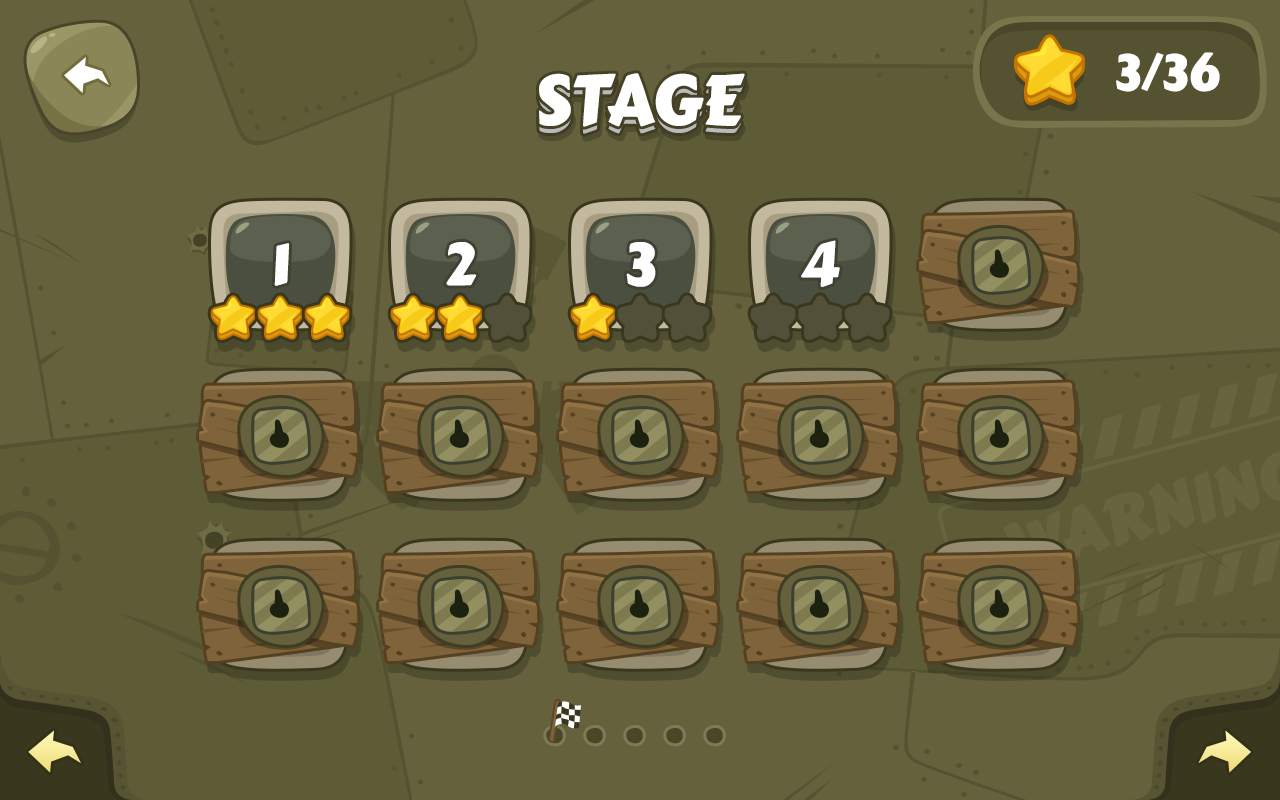
<style>
.page{position:relative;width:1280px;height:800px;background:#64613c}
.page>*{position:absolute;margin:0}
.t1{font:50px "CarterOne";color:#ffffff}
.t2{font:70px "CarterOne";color:#ffffff;text-transform:uppercase}
.t3{font:70px "CarterOne";text-transform:uppercase}
.t4{font:59.3px "CarterOne";color:#ffffff;text-transform:uppercase}
</style>
<div class="page">
<p class="t1" style="left:1116px;top:52px;width:104px;height:40px">3/36</p>
<p class="t2" style="left:539px;top:73px;width:206px;height:54px">STAGE</p>
<p class="t3" style="left:539px;top:80px;width:206px;height:54px">STAGE</p>
<p class="t4" style="left:274px;top:243px;width:15px;height:43px">1</p>
<p class="t4" style="left:446px;top:242px;width:31px;height:44px">2</p>
<p class="t4" style="left:626px;top:242px;width:30px;height:45px">3</p>
<p class="t4" style="left:801px;top:240px;width:39px;height:47px">4</p>
</div>
